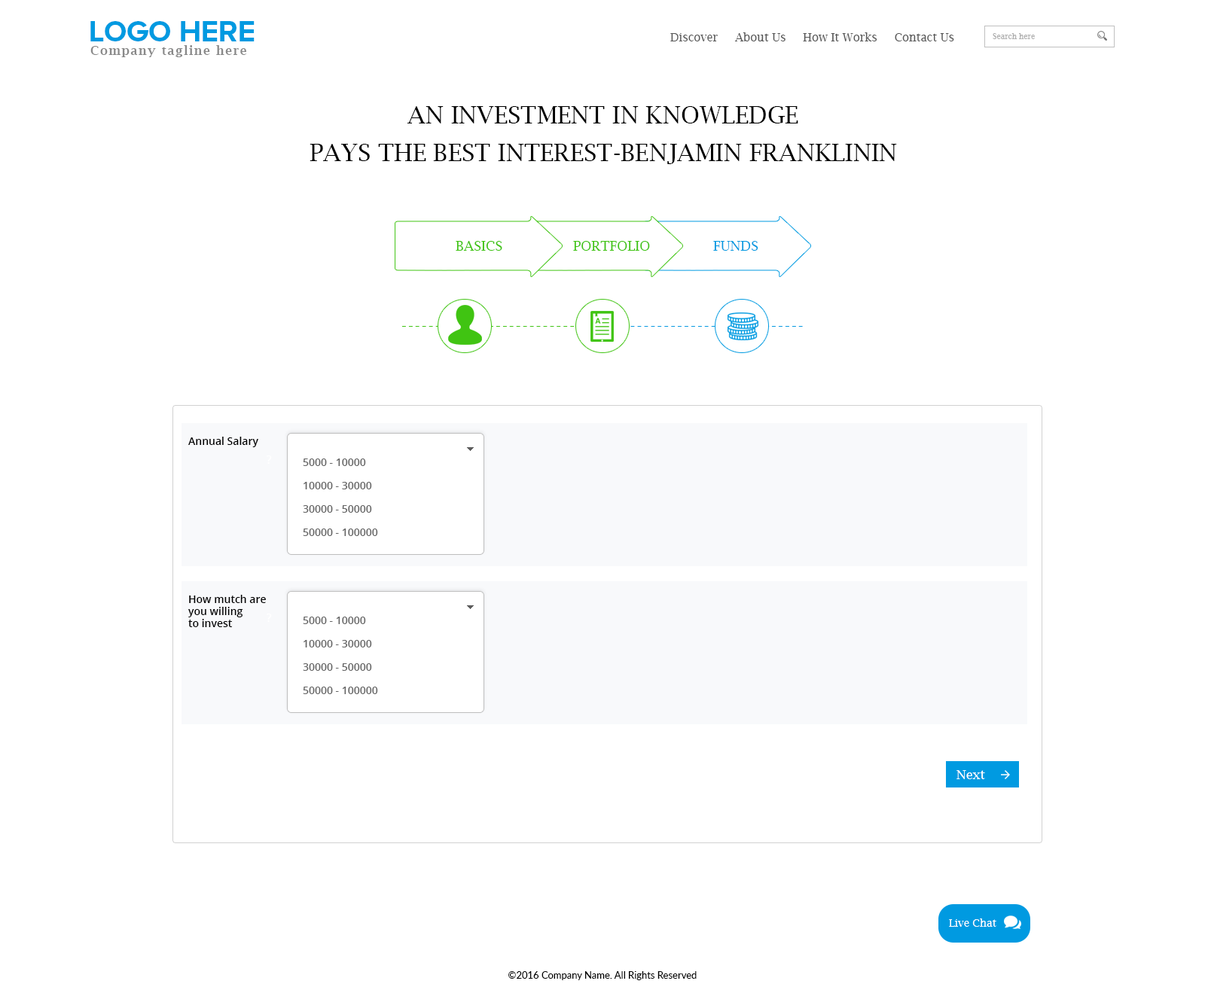
<style>
.page{position:relative;width:1205px;height:990px;background:#ffffff}
.page>*{position:absolute;margin:0}
.t1{font:30.1px "ProximaNovaA-Bold";color:#009ae1;text-transform:uppercase}
.t2{font:11.3px "LucidaBright";color:#585858}
.t3{font:7.5px "LucidaBright";color:#afafaf}
.t4{font:12px "LucidaBright-Demi";letter-spacing:0.1em;color:#898989}
.t5{font:24.1px/37.6px "LucidaBright";color:#000000;text-transform:uppercase}
.t6{font:13.6px "LucidaBright";color:#40c412}
.t7{font:13.6px "LucidaBright";color:#009ae1;text-transform:uppercase}
.t8{font:15.8px "LucidaBright";letter-spacing:0.1em;color:#40c412}
.t9{font:15.8px "LucidaBright";letter-spacing:0.1em;color:#009ae1}
.t10{font:10.5px "OpenSans-Semibold";color:#000000}
.t11{font:11.1px "OpenSans-Semibold";color:#ffffff}
.t12{font:10.5px/23.3px "OpenSans-Semibold";color:#666666}
.t13{font:10.5px/12px "OpenSans-Semibold";color:#000000}
.t14{font:12.8px "LucidaBright";color:#ffffff}
.t15{font:10.5px "LucidaBright";color:#ffffff}
.t16{font:9.8px "Lato-Regular";color:#000000}
</style>
<div class="page">
<p class="t1" style="left:90px;top:21px;width:164px;height:20px">Logo HERE</p>
<p class="t2" style="left:670px;top:32px;width:284px;height:9px">Discover     About Us     How It Works     Contact Us</p>
<p class="t3" style="left:992px;top:33px;width:42px;height:6px">Search here</p>
<p class="t4" style="left:90px;top:45px;width:156px;height:12px">Company tagline here</p>
<p class="t5" style="left:309px;top:106px;width:588px;height:58px;text-align:center">an investment in knowledge<br>pays the best interest-benjamin franklinin</p>
<p class="t6" style="left:455px;top:241px;width:47px;height:10px">BASICS</p>
<p class="t6" style="left:573px;top:241px;width:77px;height:10px">PORTFOLIO</p>
<p class="t7" style="left:713px;top:241px;width:45px;height:10px">FUNDS</p>
<p class="t8" style="left:401px;top:326px;width:402px;height:1px">----------------------------------<span class="t9">--------------------------</span></p>
<p class="t10" style="left:188px;top:437px;width:70px;height:10px">Annual Salary</p>
<p class="t11" style="left:267px;top:455px;width:5px;height:9px">?</p>
<p class="t12" style="left:303px;top:458px;width:75px;height:78px">5000 - 10000<br>10000 - 30000<br>30000 - 50000<br>50000 - 100000</p>
<p class="t13" style="left:188px;top:595px;width:78px;height:32px">How mutch are<br>you willing <br>to invest</p>
<p class="t11" style="left:267px;top:614px;width:5px;height:8px">?</p>
<p class="t12" style="left:303px;top:617px;width:75px;height:77px">5000 - 10000<br>10000 - 30000<br>30000 - 50000<br>50000 - 100000</p>
<p class="t14" style="left:956px;top:770px;width:29px;height:9px">Next</p>
<p class="t15" style="left:949px;top:918px;width:47px;height:9px">Live Chat</p>
<p class="t16" style="left:508px;top:971px;width:188px;height:9px">©2016 Company Name. All Rights Reserved</p>
</div>
